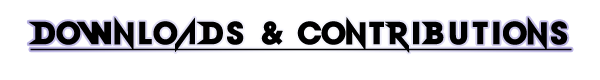
<style>
.page{position:relative;width:600px;height:80px;background:#ffffff}
.page>*{position:absolute;margin:0}
.t1{font:30px "ROCKBANDGAMEFONTV2-Bold";letter-spacing:0.1em;color:#000000;font-weight:bold;text-decoration:underline}
</style>
<div class="page">
<p class="t1" style="left:28px;top:17px;width:544px;height:36px">DOWNLOADS &amp; CONTRIBUTIONS</p>
</div>
